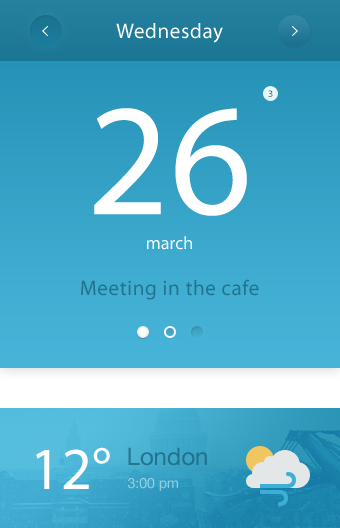
<style>
.page{position:relative;width:340px;height:528px}
.page>*{position:absolute;margin:0}
.t1{font:21px "MyriadPro-Regular";letter-spacing:0.03em;color:#ffffff}
.t2{font:10px "MyriadPro-Regular";letter-spacing:0.03em}
.t3{font:160px "MyriadPro-Regular";color:#ffffff}
.t4{font:18px "MyriadPro-Regular";color:#ffffff}
.t5{font:21px "MyriadPro-Regular";letter-spacing:0.03em;color:#22738f}
.t6{font:60px "MyriadPro-Regular";color:#ffffff}
.t7{font:24px "HelveticaNeue";color:#22728d}
.t8{font:14px "HelveticaNeue";color:#99cfe2}
</style>
<div class="page">
<p class="t1" style="left:116px;top:23px;width:107px;height:20px">Wednesday</p>
<p class="t2" style="left:268px;top:90px;width:5px;height:7px">3</p>
<p class="t3" style="left:94px;top:108px;width:153px;height:108px">26</p>
<p class="t4" style="left:147px;top:236px;width:45px;height:14px">march</p>
<p class="t5" style="left:81px;top:279px;width:178px;height:21px">Meeting in the cafe</p>
<p class="t6" style="left:36px;top:447px;width:74px;height:42px">12°</p>
<p class="t7" style="left:128px;top:447px;width:79px;height:19px">London</p>
<p class="t8" style="left:128px;top:478px;width:50px;height:13px">3:00 pm</p>
</div>
